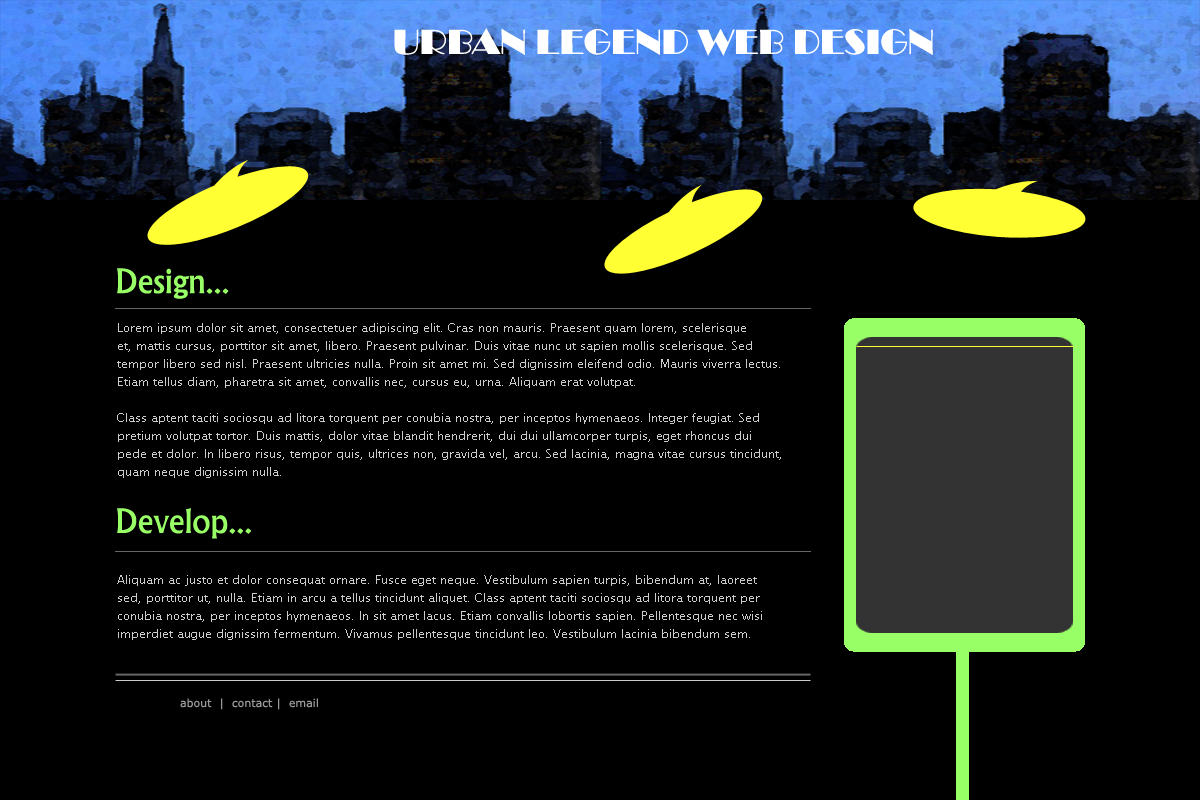
<style>
.page{position:relative;width:1200px;height:800px;background:#000000}
.page>*{position:absolute;margin:0}
.t1{font:36px "Broadway";color:#ffffff}
.t2{font:36px "Narkisim";color:#99ff66}
.t3{font:12px/18px "LucidaSansUnicode";color:#cccccc}
.t4{font:11px "Verdana";color:#999999}
</style>
<div class="page">
<p class="t1" style="left:394px;top:28px;width:539px;height:28px">URBAN LEGEND WEB DESIGN</p>
<p class="t2" style="left:117px;top:268px;width:112px;height:31px">Design...</p>
<p class="t3" style="left:117px;top:323px;width:664px;height:317px">Lorem ipsum dolor sit amet, consectetuer adipiscing elit. Cras non mauris. Praesent quam lorem, scelerisque <br>et, mattis cursus, porttitor sit amet, libero. Praesent pulvinar. Duis vitae nunc ut sapien mollis scelerisque. Sed <br>tempor libero sed nisl. Praesent ultricies nulla. Proin sit amet mi. Sed dignissim eleifend odio. Mauris viverra lectus. <br>Etiam tellus diam, pharetra sit amet, convallis nec, cursus eu, urna. Aliquam erat volutpat.<br><br>Class aptent taciti sociosqu ad litora torquent per conubia nostra, per inceptos hymenaeos. Integer feugiat. Sed <br>pretium volutpat tortor. Duis mattis, dolor vitae blandit hendrerit, dui dui ullamcorper turpis, eget rhoncus dui <br>pede et dolor. In libero risus, tempor quis, ultrices non, gravida vel, arcu. Sed lacinia, magna vitae cursus tincidunt, <br>quam neque dignissim nulla.<br><br><br><br> <br><br>Aliquam ac justo et dolor consequat ornare. Fusce eget neque. Vestibulum sapien turpis, bibendum at, laoreet <br>sed, porttitor ut, nulla. Etiam in arcu a tellus tincidunt aliquet. Class aptent taciti sociosqu ad litora torquent per <br>conubia nostra, per inceptos hymenaeos. In sit amet lacus. Etiam convallis lobortis sapien. Pellentesque nec wisi <br>imperdiet augue dignissim fermentum. Vivamus pellentesque tincidunt leo. Vestibulum lacinia bibendum sem.</p>
<p class="t2" style="left:117px;top:508px;width:134px;height:31px">Develop...</p>
<p class="t4" style="left:180px;top:698px;width:138px;height:12px">about  |  contact |  email</p>
</div>
